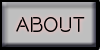
<style>
.page{position:relative;width:100px;height:50px;background:#bfbfbf}
.page>*{position:absolute;margin:0}
.t1{font:20.5px "Beon-Medium";color:#000000}
</style>
<div class="page">
<p class="t1" style="left:16px;top:17px;width:69px;height:15px">ABOUT</p>
</div>
